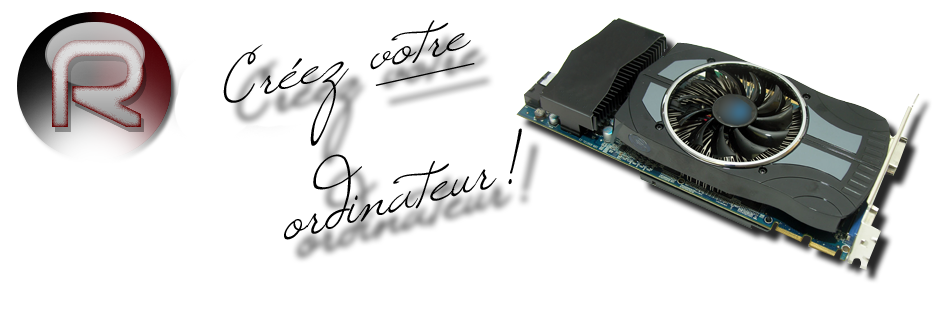
<style>
.page{position:relative;width:940px;height:335px;background:#ffffff}
.page>*{position:absolute;margin:0}
.t1{font:78.8px "Windsong";color:#000000;scale:1.11 1}
.t2{font:87.5px "Windsong";color:#000000}
</style>
<div class="page">
<p class="t1" style="left:223px;top:20px;width:248px;height:126px;rotate:-13deg">Créez votre</p>
<p class="t2" style="left:284px;top:128px;width:238px;height:112px;rotate:-14deg">ordinateur!</p>
</div>
